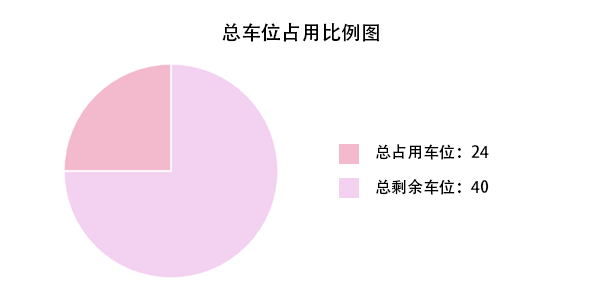
<style>
.page{position:relative;width:600px;height:300px;background:#ffffff}
.page>*{position:absolute;margin:0}
.t1{font:20px "AdobeHeitiStd-Regular";color:#000000}
.t2{font:16px "AdobeHeitiStd-Regular";color:#000000}
</style>
<div class="page">
<p class="t1" style="left:222px;top:22px;width:157px;height:20px">总车位占用比例图</p>
<p class="t2" style="left:376px;top:144px;width:113px;height:16px">总占用车位：24</p>
<p class="t2" style="left:376px;top:179px;width:113px;height:16px">总剩余车位：40</p>
</div>
